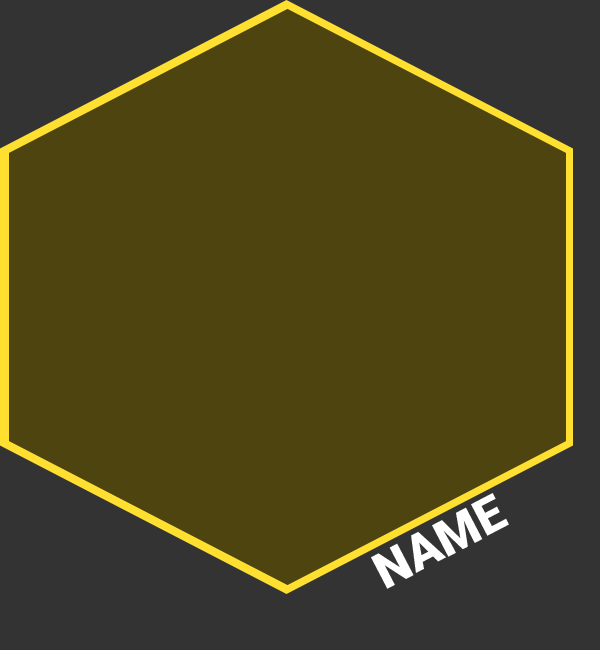
<style>
.page{position:relative;width:600px;height:650px;background:#4d440f}
.page>*{position:absolute;margin:0}
.t1{font:50px "Roboto-Black";color:#ffffff}
</style>
<div class="page">
<p class="t1" style="left:371px;top:493px;width:138px;height:96px;rotate:-27deg">NAME</p>
</div>
